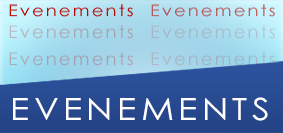
<style>
.page{position:relative;width:283px;height:133px}
.page>*{position:absolute;margin:0}
.t1{font:30.6px "CenturyGothic";letter-spacing:0.12em;color:#ffffff;scale:1.17 1}
</style>
<div class="page">
<p class="t1" style="left:13px;top:97px;width:255px;height:24px">EVENEMENTS</p>
</div>
